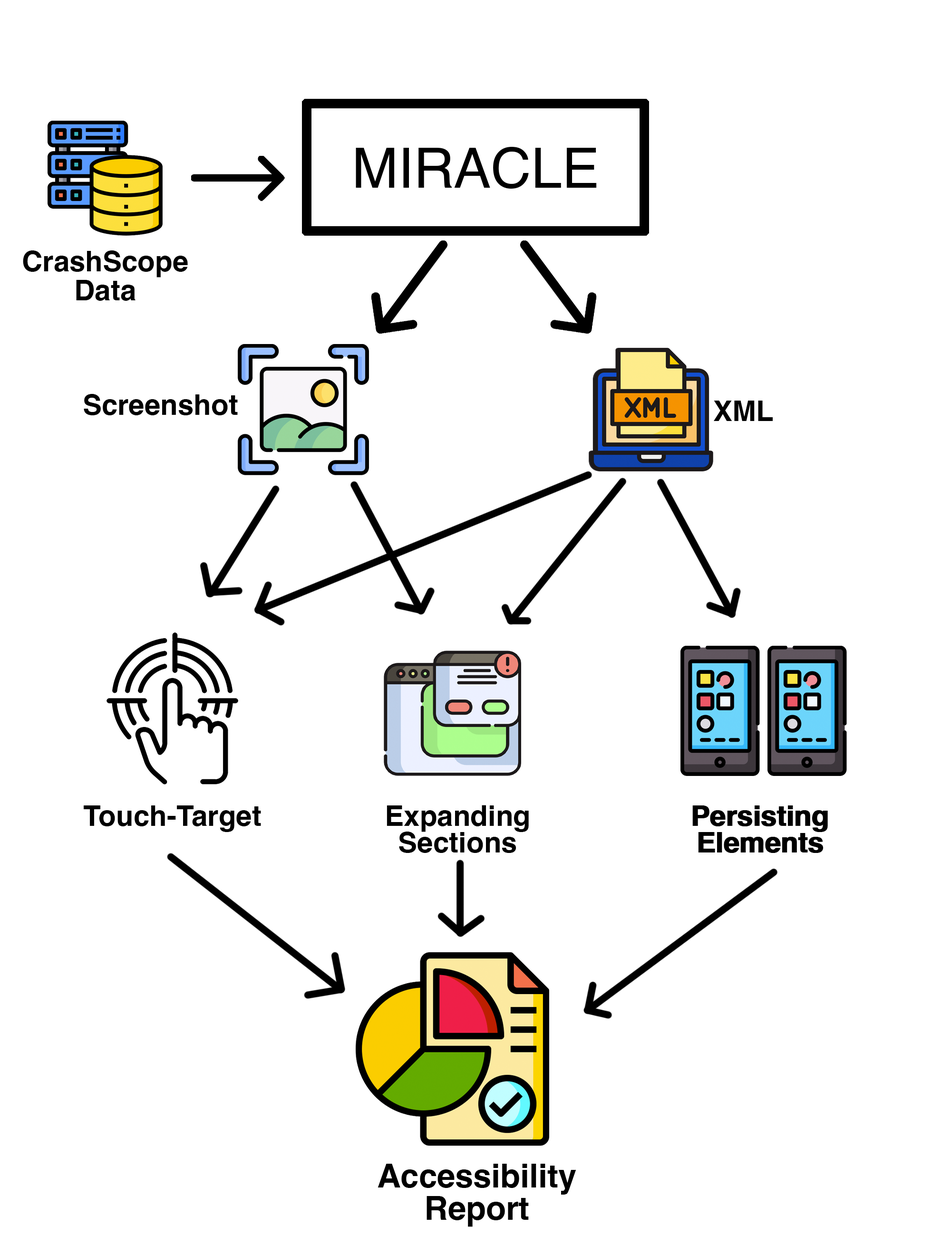
<style>
.page{position:relative;width:951px;height:1254px;background:#ffffff}
.page>*{position:absolute;margin:0}
.t1{font:55.6px "Helvetica";color:#000000}
.t2{font:28.5px/29px "Helvetica-Bold";color:#000000}
.t3{font:28.5px "Helvetica-Bold";color:#000000}
.t4{font:28.5px/26.6px "Helvetica-Bold";color:#000000}
.t5{font:32.6px/32.6px "Helvetica-Bold";color:#000000}
</style>
<div class="page">
<p class="t1" style="left:356px;top:147px;width:241px;height:42px">MIRACLE</p>
<p class="t2" style="left:23px;top:250px;width:165px;height:51px;text-align:center">CrashScope<br>Data</p>
<p class="t3" style="left:84px;top:394px;width:154px;height:21px">Screenshot</p>
<p class="t3" style="left:713px;top:401px;width:59px;height:20px">XML</p>
<p class="t3" style="left:84px;top:806px;width:177px;height:26px">Touch-Target</p>
<p class="t4" style="left:386px;top:805px;width:143px;height:48px;text-align:center">Expanding<br>Sections</p>
<p class="t4" style="left:692px;top:806px;width:135px;height:47px;text-align:center">Persisting<br>Elements</p>
<p class="t4" style="left:693px;top:806px;width:135px;height:47px;text-align:center">Persisting<br>Elements</p>
<p class="t5" style="left:377px;top:1164px;width:199px;height:63px;text-align:center">Accessibility<br>Report</p>
</div>
